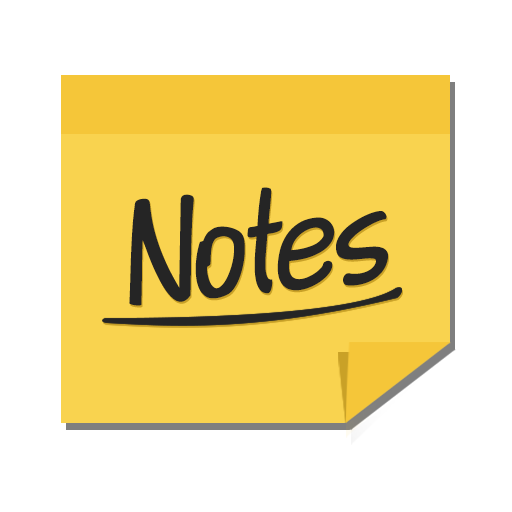
<style>
.page{position:relative;width:512px;height:512px;background:#ffffff}
.page>*{position:absolute;margin:0}
.t1{font:140.4px "ANote";color:#252525;font-style:italic;scale:1.05 1}
</style>
<div class="page">
<p class="t1" style="left:129px;top:187px;width:259px;height:119px;rotate:-5deg">Notes</p>
</div>
